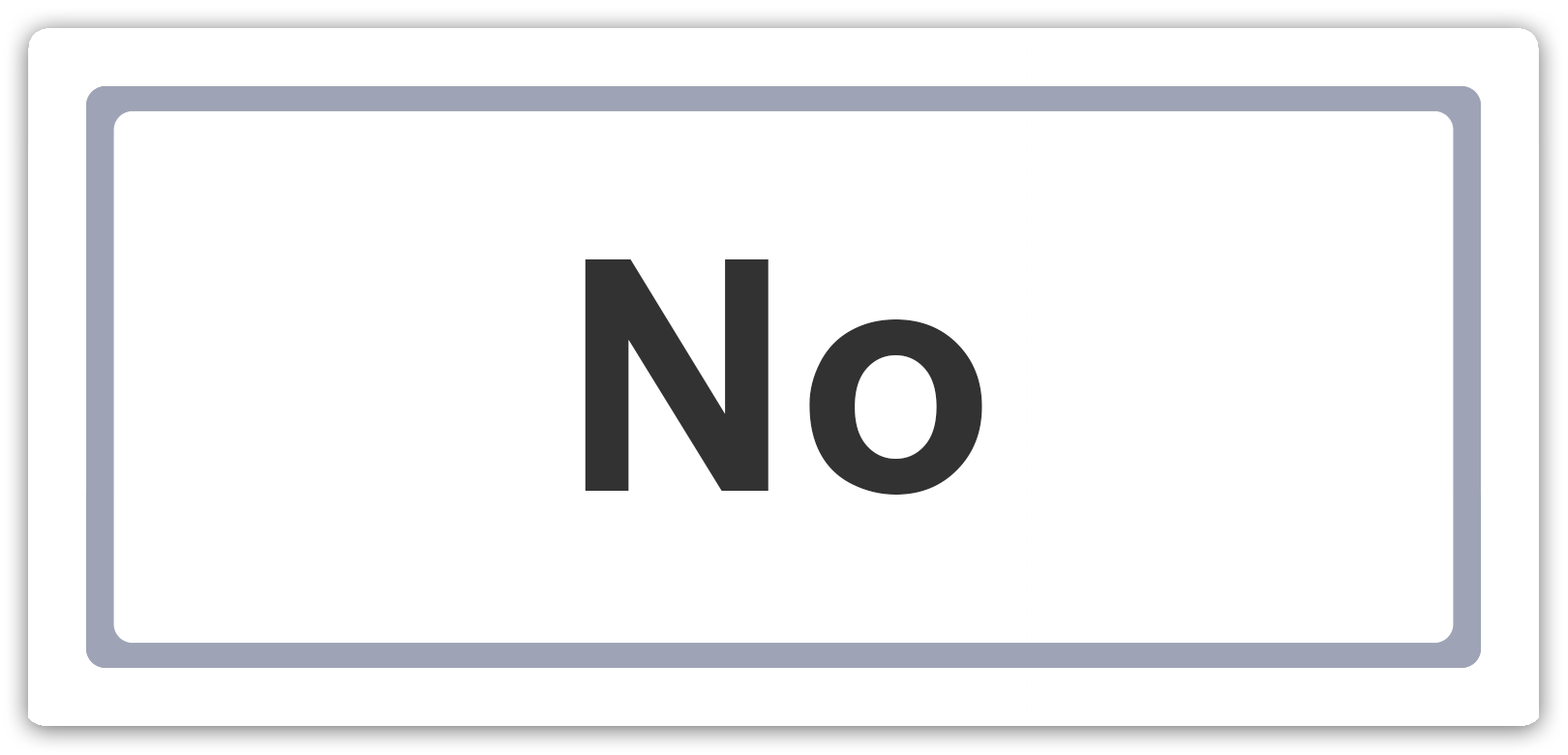
<style>
.page{position:relative;width:1568px;height:755px;background:#ffffff}
.page>*{position:absolute;margin:0}
.t1{font:322.6px "Arial-BoldMT";letter-spacing:0.007em;color:#323232}
</style>
<div class="page">
<p class="t1" style="left:585px;top:259px;width:397px;height:236px">No</p>
</div>
